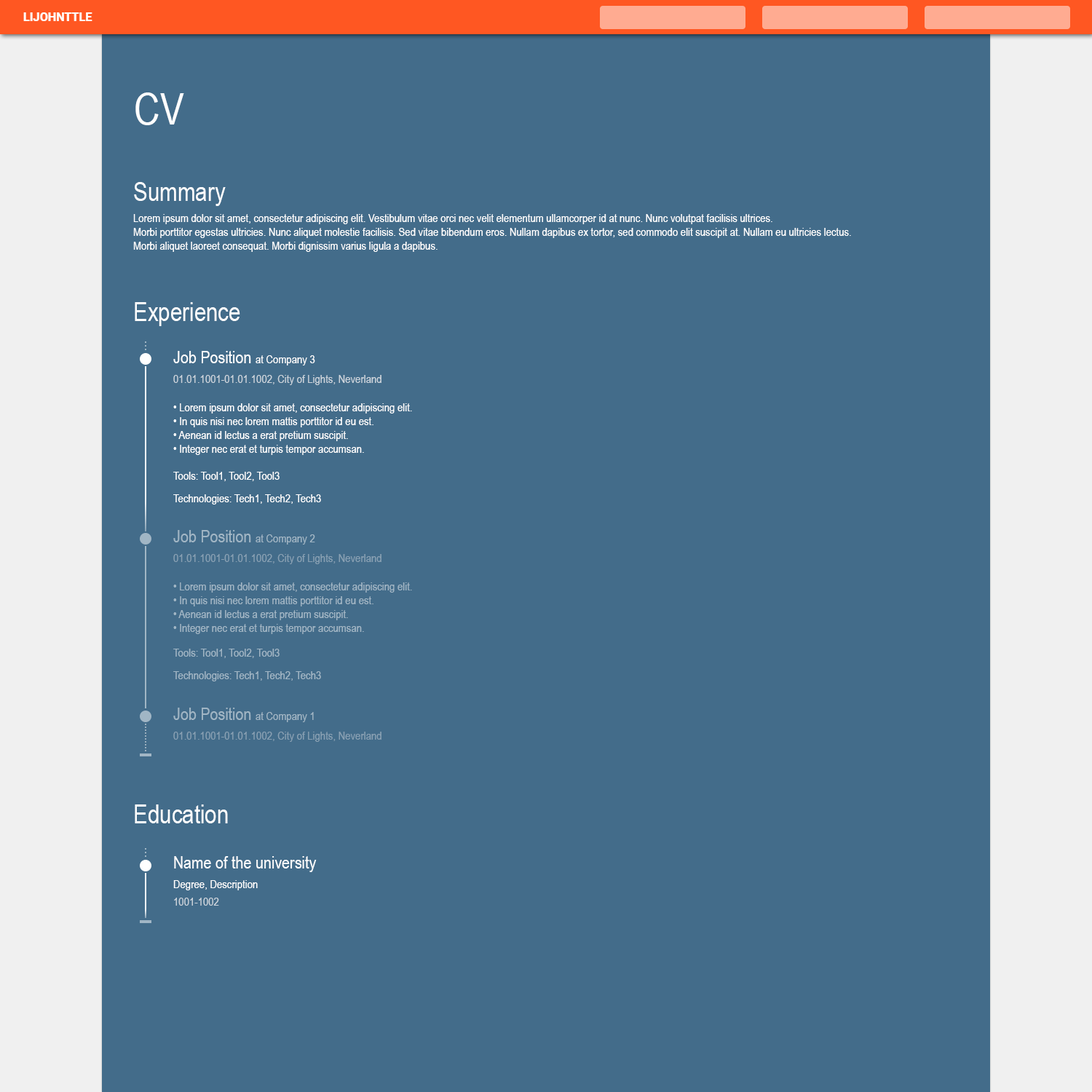
<style>
.page{position:relative;width:1092px;height:1092px;background:#436c8a}
.page>*{position:absolute;margin:0}
.t1{font:43.7px "ArialNarrow";color:#ffffff}
.t2{font:26.1px "ArialNarrow";color:#ffffff}
.t3{font:11.6px "ArialNarrow";color:#ffffff}
.t4{font:17.5px "ArialNarrow";color:#ffffff}
.t5{font:11.6px "ArialNarrow";color:#ccd4dc}
.t6{font:17.5px "ArialNarrow";color:#a1b6c5}
.t7{font:11.6px "ArialNarrow";color:#a1b6c5}
.t8{font:11.6px "ArialNarrow";color:#88a0b3}
.t9{font:11.7px "ArialNarrow";color:#ffffff}
.t10{font:11.7px "ArialNarrow";color:#ccd4dc}
</style>
<div class="page">
<p class="t1" style="left:135px;top:92px;width:49px;height:33px">CV</p>
<p class="t2" style="left:134px;top:182px;width:92px;height:24px">Summary</p>
<p class="t3" style="left:133px;top:214px;width:718px;height:38px">Lorem ipsum dolor sit amet, consectetur adipiscing elit. Vestibulum vitae orci nec velit elementum ullamcorper id at nunc. Nunc volutpat facilisis ultrices.<br>Morbi porttitor egestas ultricies. Nunc aliquet molestie facilisis. Sed vitae bibendum eros. Nullam dapibus ex tortor, sed commodo elit suscipit at. Nullam eu ultricies lectus.<br>Morbi aliquet laoreet consequat. Morbi dignissim varius ligula a dapibus.</p>
<p class="t2" style="left:135px;top:302px;width:105px;height:24px">Experience</p>
<p class="t4" style="left:173px;top:351px;width:142px;height:14px">Job Position <span class="t3">at Company 3</span></p>
<p class="t5" style="left:173px;top:375px;width:208px;height:10px">01.01.1001-01.01.1002, City of Lights, Neverland</p>
<p class="t3" style="left:173px;top:403px;width:239px;height:52px">• Lorem ipsum dolor sit amet, consectetur adipiscing elit.<br>• In quis nisi nec lorem mattis porttitor id eu est.<br>• Aenean id lectus a erat pretium suscipit.<br>• Integer nec erat et turpis tempor accumsan.</p>
<p class="t3" style="left:173px;top:472px;width:107px;height:9px">Tools: Tool1, Tool2, Tool3</p>
<p class="t3" style="left:173px;top:494px;width:148px;height:10px">Technologies: Tech1, Tech2, Tech3</p>
<p class="t6" style="left:173px;top:530px;width:142px;height:15px">Job Position <span class="t7">at Company 2</span></p>
<p class="t8" style="left:173px;top:554px;width:208px;height:10px">01.01.1001-01.01.1002, City of Lights, Neverland</p>
<p class="t7" style="left:173px;top:582px;width:239px;height:52px">• Lorem ipsum dolor sit amet, consectetur adipiscing elit.<br>• In quis nisi nec lorem mattis porttitor id eu est.<br>• Aenean id lectus a erat pretium suscipit.<br>• Integer nec erat et turpis tempor accumsan.</p>
<p class="t7" style="left:173px;top:649px;width:107px;height:9px">Tools: Tool1, Tool2, Tool3</p>
<p class="t7" style="left:173px;top:671px;width:148px;height:10px">Technologies: Tech1, Tech2, Tech3</p>
<p class="t6" style="left:173px;top:708px;width:141px;height:14px">Job Position <span class="t7">at Company 1</span></p>
<p class="t8" style="left:173px;top:732px;width:208px;height:10px">01.01.1001-01.01.1002, City of Lights, Neverland</p>
<p class="t2" style="left:135px;top:804px;width:93px;height:19px">Education</p>
<p class="t4" style="left:174px;top:856px;width:143px;height:16px">Name of the university</p>
<p class="t9" style="left:173px;top:880px;width:85px;height:10px">Degree, Description</p>
<p class="t10" style="left:174px;top:898px;width:45px;height:8px">1001-1002</p>
</div>
